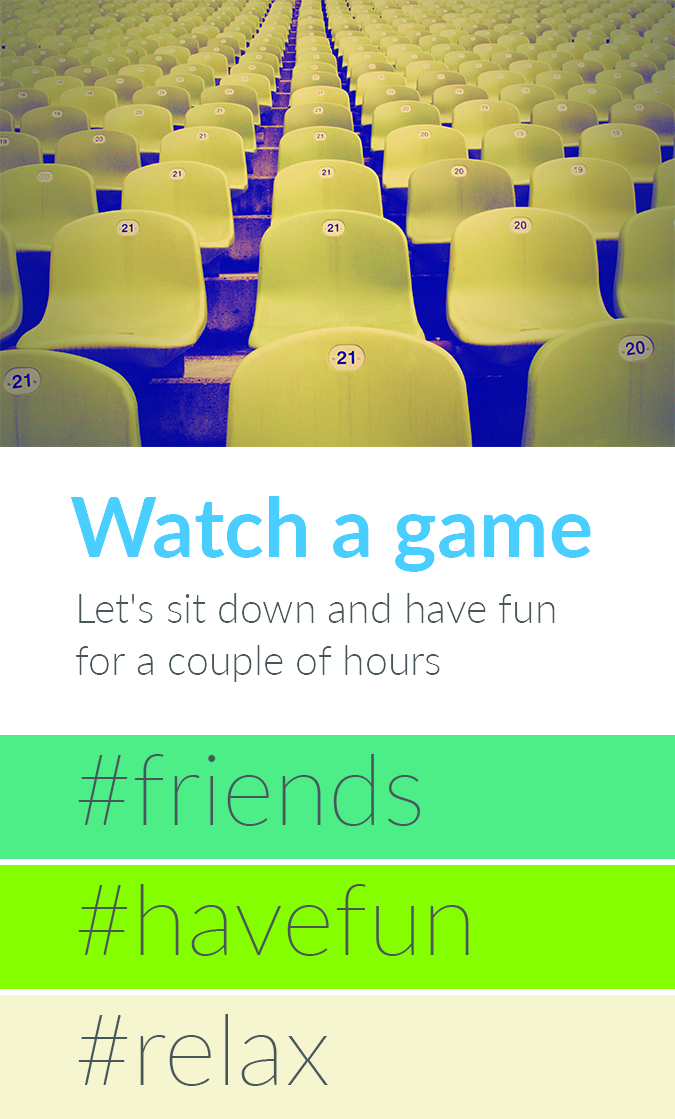
<style>
.page{position:relative;width:675px;height:1119px;background:#ffffff}
.page>*{position:absolute;margin:0}
.t1{font:83px "Lato-Bold";color:#4acdff}
.t2{font:41px/52px "Lato-Light";color:#48585a}
</style>
<div class="page">
<p class="t1" style="left:70px;top:496px;width:521px;height:76px">Watch a game</p>
<p class="t2" style="left:76px;top:593px;width:479px;height:89px;text-align:right">Let's sit down and have fun for a couple of hours</p>
</div>
